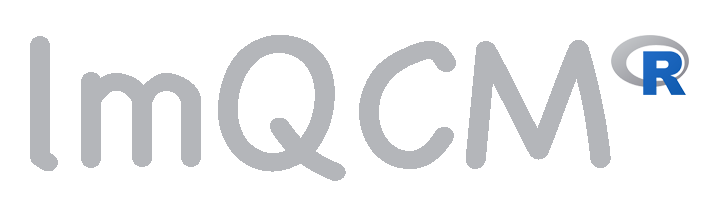
<style>
.page{position:relative;width:720px;height:216px;background:#ffffff}
.page>*{position:absolute;margin:0}
.t1{font:186.1px "ChalkboardSE-Regular";color:#b4b6ba}
</style>
<div class="page">
<p class="t1" style="left:30px;top:35px;width:581px;height:146px">lmQCM</p>
</div>
